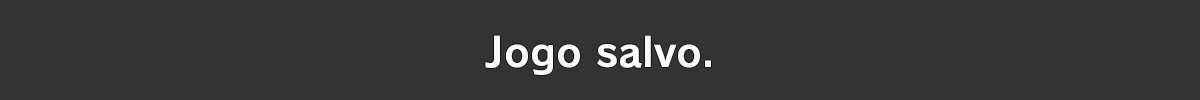
<style>
.page{position:relative;width:1200px;height:100px;background:#333333}
.page>*{position:absolute;margin:0}
.t1{font:40px "RodinPro-B";color:#fbfafb}
</style>
<div class="page">
<p class="t1" style="left:485px;top:35px;width:226px;height:40px">Jogo salvo.</p>
</div>
